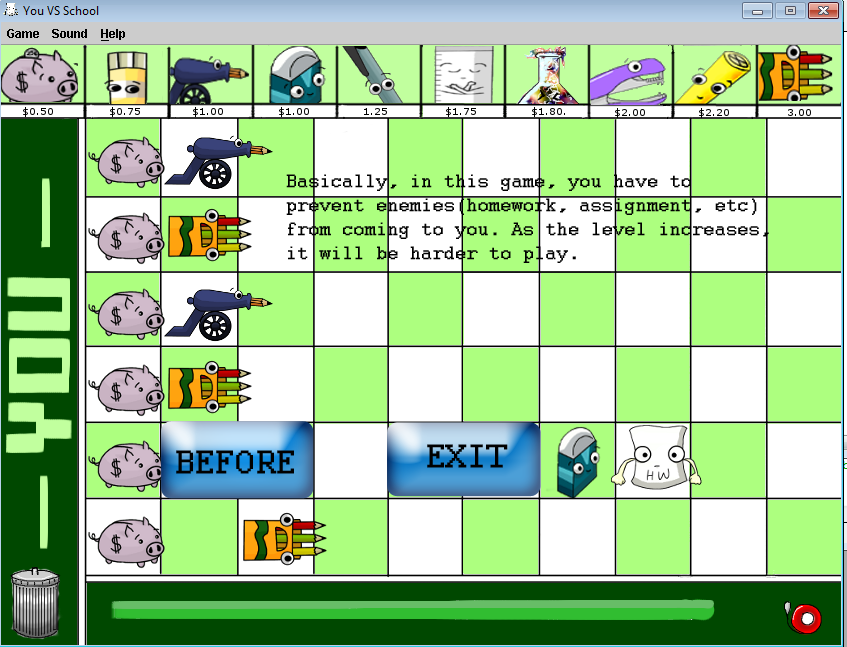
<style>
.page{position:relative;width:847px;height:647px;background:#ffffff}
.page>*{position:absolute;margin:0}
.t1{font:20px "Courier";color:#000000;font-weight:bold}
.t2{font:36px "Courier";color:#000000;font-weight:bold}
</style>
<div class="page">
<p class="t1" style="left:286px;top:174px;width:483px;height:89px">Basically, in this game, you have to prevent enemies(homework, assignment, etc) from coming to you. As the level increases, it will be harder to play.</p>
<p class="t2" style="left:427px;top:444px;width:81px;height:24px">EXIT</p>
<p class="t2" style="left:176px;top:450px;width:118px;height:24px">BEFORE</p>
</div>
